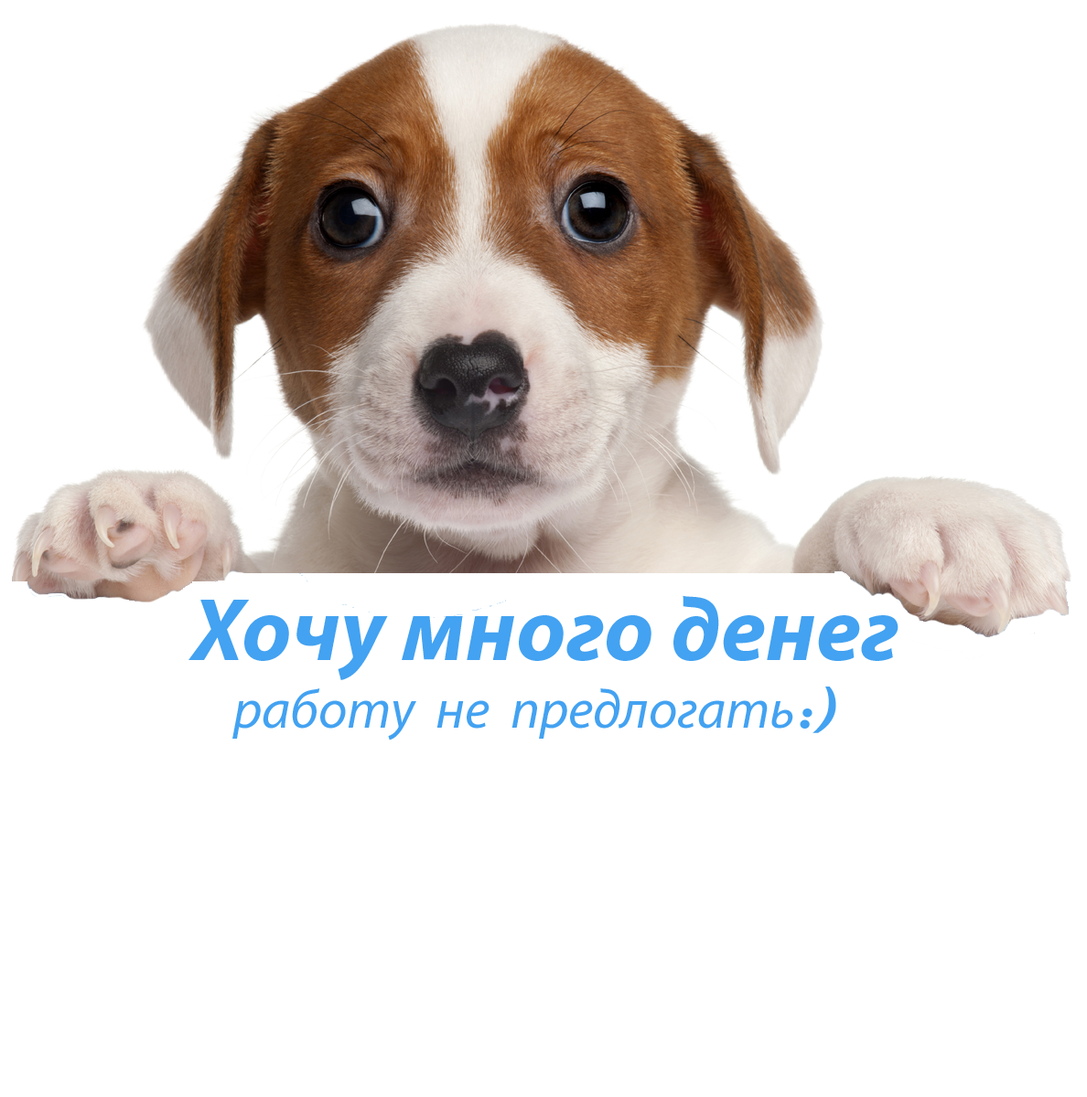
<style>
.page{position:relative;width:1087px;height:1097px;background:#ffffff}
.page>*{position:absolute;margin:0}
.t1{font:54.9px/5.5px "MyriadPro-It";color:#43a2f1}
.t2{font:89.6px "MyriadPro-BoldIt";color:#43a2f1}
.t3{font:89.6px/5.5px "MyriadPro-BoldIt";color:#43a2f1}
.t4{font:54.9px "MyriadPro-It";color:#43a2f1}
.t5{font:54.9px "Magneto-Bold";color:#43a2f1}
</style>
<div class="page">
<p class="t1" style="left:188px;top:595px;width:710px;height:146px;text-align:center"><span class="t2">Хочу мно</span><span class="t3">го денег<br></span>работу не предлога<span class="t4">ть</span><span class="t5">:)</span></p>
</div>
